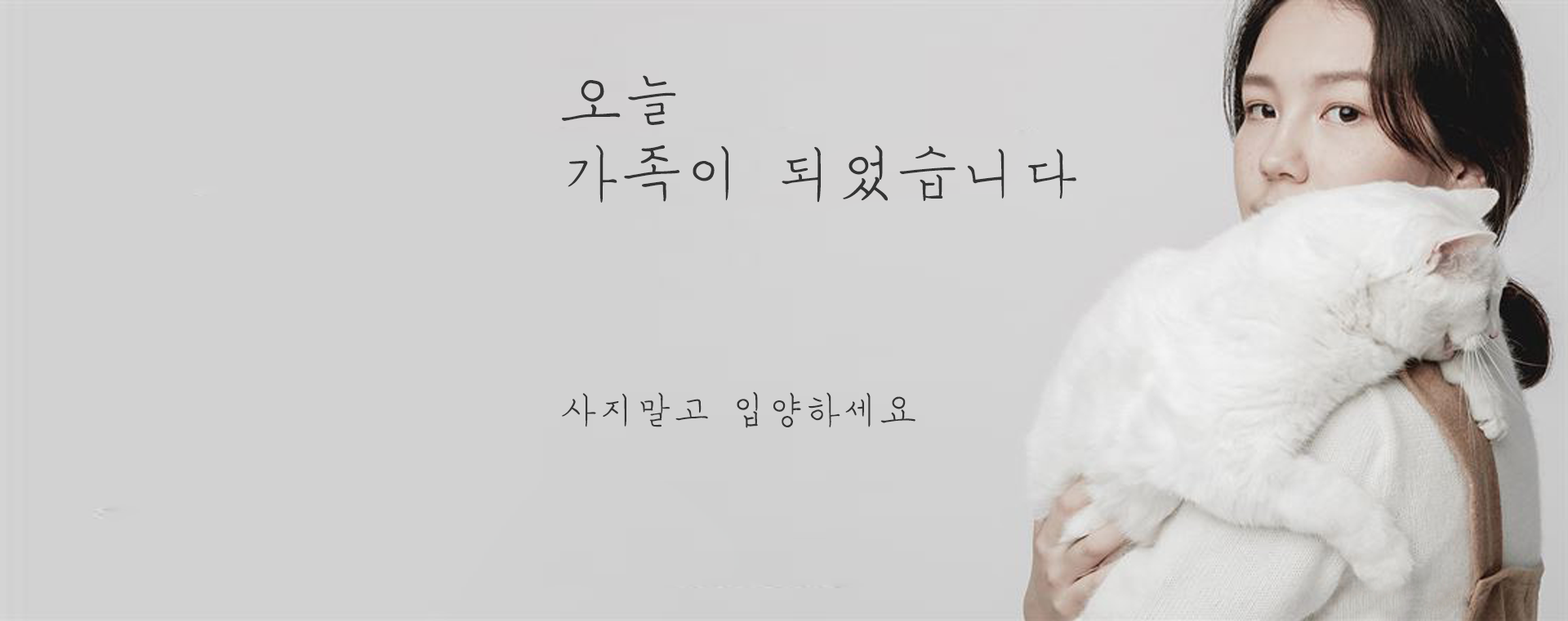
<style>
.page{position:relative;width:1568px;height:621px;background:#d2d2d2}
.page>*{position:absolute;margin:0}
.t1{font:61.2px "MSugiJeong";color:#333333}
.t2{font:37.4px "MSugiJeong";color:#333333}
</style>
<div class="page">
<p class="t1" style="left:562px;top:75px;width:514px;height:128px">오늘 <br>가족이 되었습니다</p>
<p class="t2" style="left:562px;top:391px;width:353px;height:37px">사지말고 입양하세요</p>
</div>
